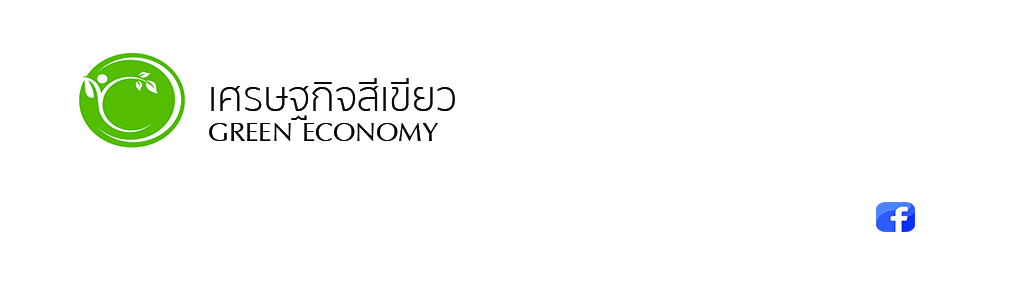
<style>
.page{position:relative;width:1024px;height:300px;background:#ffffff}
.page>*{position:absolute;margin:0}
.t1{font:41.7px "SukhumvitSet-Thin";color:#060808}
.t2{font:41.7px "IrisUPC";color:#060808}
</style>
<div class="page">
<p class="t1" style="left:211px;top:78px;width:244px;height:42px">เศรษฐกิจสีเขียว</p>
<p class="t2" style="left:209px;top:123px;width:229px;height:18px">GREEN ECONOMY</p>
</div>
